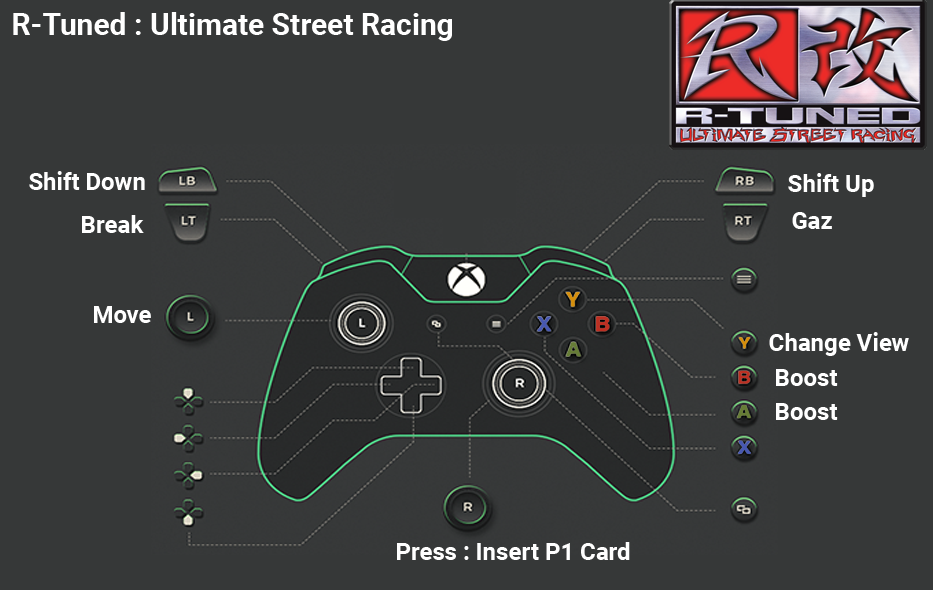
<style>
.page{position:relative;width:933px;height:590px;background:#363838}
.page>*{position:absolute;margin:0}
.t1{font:30px "Roboto-Bold";color:#ffffff}
.t2{font:24px "Roboto-Bold";color:#ffffff}
</style>
<div class="page">
<p class="t1" style="left:13px;top:12px;width:439px;height:29px">R-Tuned : Ultimate Street Racing</p>
<p class="t2" style="left:29px;top:171px;width:116px;height:19px">Shift Down</p>
<p class="t2" style="left:788px;top:173px;width:86px;height:24px">Shift Up</p>
<p class="t2" style="left:82px;top:215px;width:62px;height:18px">Break</p>
<p class="t2" style="left:792px;top:212px;width:40px;height:17px">Gaz</p>
<p class="t2" style="left:94px;top:306px;width:57px;height:17px">Move</p>
<p class="t2" style="left:769px;top:332px;width:140px;height:24px">Change View</p>
<p class="t2" style="left:776px;top:369px;width:62px;height:17px">Boost</p>
<p class="t2" style="left:776px;top:403px;width:62px;height:17px">Boost</p>
<p class="t2" style="left:397px;top:542px;width:233px;height:18px">Press : Insert P1 Card</p>
</div>
